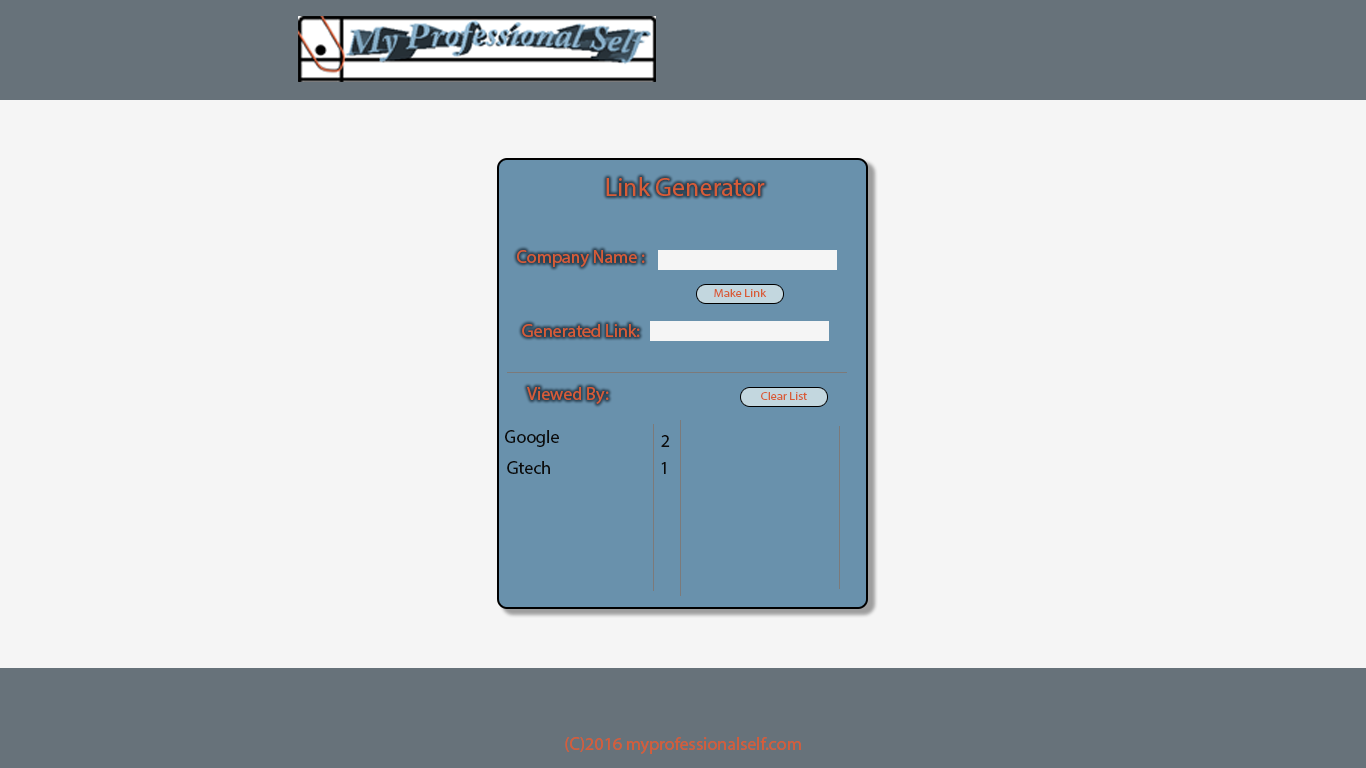
<style>
.page{position:relative;width:1366px;height:768px;background:#f5f5f5}
.page>*{position:absolute;margin:0}
.t1{font:26px "MyriadPro-Regular";color:#d75c37}
.t2{font:18px "MyriadPro-Regular";color:#d75c37}
.t3{font:10.6px "MyriadPro-Regular";color:#d75c37;scale:1.16 1}
.t4{font:18px "MyriadPro-Regular";color:#0c0c0c}
</style>
<div class="page">
<p class="t1" style="left:606px;top:177px;width:159px;height:19px">Link Generator</p>
<p class="t2" style="left:517px;top:250px;width:128px;height:17px">Company Name :</p>
<p class="t3" style="left:714px;top:289px;width:53px;height:8px">Make Link</p>
<p class="t2" style="left:522px;top:324px;width:118px;height:13px">Generated Link:</p>
<p class="t2" style="left:527px;top:387px;width:82px;height:17px">Viewed By:</p>
<p class="t3" style="left:761px;top:392px;width:46px;height:8px">Clear List</p>
<p class="t4" style="left:505px;top:430px;width:54px;height:17px">Google</p>
<p class="t4" style="left:661px;top:435px;width:9px;height:12px">2</p>
<p class="t4" style="left:507px;top:461px;width:43px;height:13px">Gtech</p>
<p class="t4" style="left:661px;top:462px;width:5px;height:12px">1</p>
<p class="t2" style="left:565px;top:737px;width:236px;height:17px">(C)2016 myprofessionalself.com</p>
</div>
